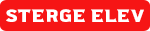
<style>
.page{position:relative;width:150px;height:31px;background:#f61515}
.page>*{position:absolute;margin:0}
.t1{font:17.7px "Ridgeline201-Regular";color:#ffffff}
</style>
<div class="page">
<p class="t1" style="left:6px;top:9px;width:138px;height:13px">sterge elev</p>
</div>
